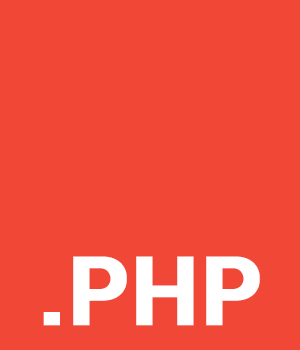
<style>
.page{position:relative;width:300px;height:350px;background:#f14736}
.page>*{position:absolute;margin:0}
.t1{font:95px "Roboto-Bold";color:#ffffff;font-weight:bold}
</style>
<div class="page">
<p class="t1" style="left:43px;top:256px;width:217px;height:70px">.PHP</p>
</div>
